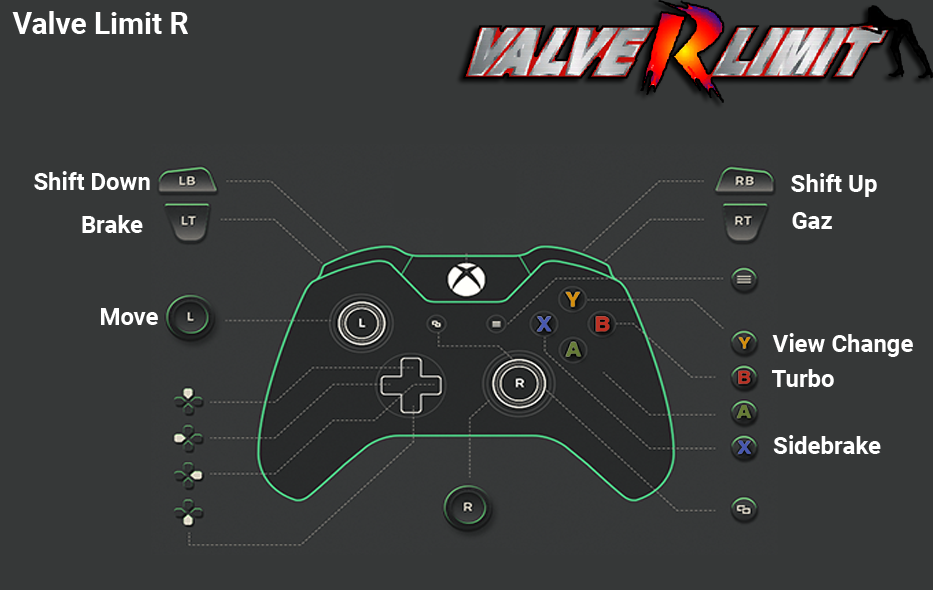
<style>
.page{position:relative;width:933px;height:590px;background:#363838}
.page>*{position:absolute;margin:0}
.t1{font:30px "Roboto-Bold";color:#ffffff}
.t2{font:24px "Roboto-Bold";color:#ffffff}
</style>
<div class="page">
<p class="t1" style="left:12px;top:11px;width:176px;height:23px">Valve Limit R</p>
<p class="t2" style="left:34px;top:171px;width:116px;height:19px">Shift Down</p>
<p class="t2" style="left:791px;top:173px;width:86px;height:24px">Shift Up</p>
<p class="t2" style="left:82px;top:215px;width:61px;height:18px">Brake</p>
<p class="t2" style="left:792px;top:212px;width:40px;height:17px">Gaz</p>
<p class="t2" style="left:101px;top:308px;width:57px;height:17px">Move</p>
<p class="t2" style="left:772px;top:333px;width:141px;height:24px">View Change</p>
<p class="t2" style="left:772px;top:369px;width:62px;height:18px">Turbo</p>
<p class="t2" style="left:773px;top:435px;width:108px;height:19px">Sidebrake</p>
</div>
